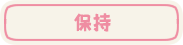
<style>
.page{position:relative;width:183px;height:45px;background:#f7f3e9}
.page>*{position:absolute;margin:0}
.t1{font:12px "shetumodengxiaofangti";color:#ef8da2;font-weight:bold;scale:0.94 1}
</style>
<div class="page">
<p class="t1" style="left:74px;top:13px;width:37px;height:19px">保持</p>
</div>
